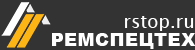
<style>
.page{position:relative;width:195px;height:50px;background:#333333}
.page>*{position:absolute;margin:0}
.t1{font:18px "LucidaSansUnicode";letter-spacing:0.025em;color:#ffffff}
.t2{font:18px "Arial-Black";letter-spacing:0.025em;color:#ffffff}
</style>
<div class="page">
<p class="t1" style="left:125px;top:16px;width:69px;height:15px">rstop.ru</p>
<p class="t2" style="left:52px;top:33px;width:144px;height:16px">РЕМСПЕЦТЕХ</p>
</div>
